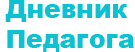
<style>
.page{position:relative;width:135px;height:52px;background:#ffffff}
.page>*{position:absolute;margin:0}
.t1{font:25px "Arial-Black";color:#0cc2d2}
</style>
<div class="page">
<p class="t1" style="left:5px;top:0px;width:129px;height:52px">Дневник<br>Педагога</p>
</div>
